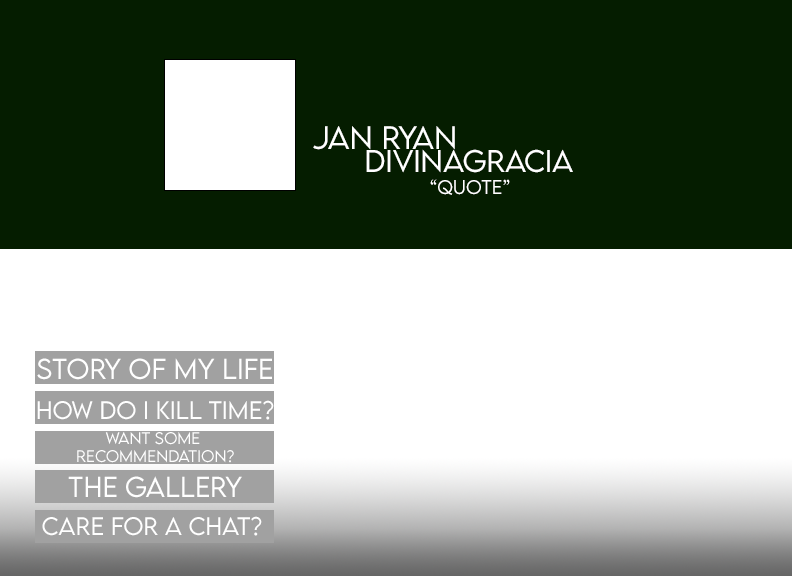
<style>
.page{position:relative;width:792px;height:576px;background:#051d00}
.page>*{position:absolute;margin:0}
.t1{font:28.9px "LEMONMILK-Light";color:#ffffff}
.t2{font:28px "LEMONMILK-Light";color:#ffffff}
.t3{font:17.7px "LEMONMILK-Light";color:#ffffff}
.t4{font:25.6px "LEMONMILK-Light";color:#ffffff}
.t5{font:22.6px "LEMONMILK-Light";color:#ffffff}
.t6{font:15px "LEMONMILK-Light";color:#ffffff}
</style>
<div class="page">
<p class="t1" style="left:313px;top:126px;width:142px;height:24px">Jan Ryan</p>
<p class="t2" style="left:366px;top:149px;width:207px;height:24px">divinagracia</p>
<p class="t3" style="left:430px;top:179px;width:80px;height:16px">“QUOTE”</p>
<p class="t4" style="left:37px;top:358px;width:235px;height:22px">Story of my life</p>
<p class="t5" style="left:37px;top:400px;width:237px;height:20px">How do I kill time?</p>
<p class="t6" style="left:77px;top:432px;width:157px;height:31px;text-align:center">want some<br> recommendation?</p>
<p class="t4" style="left:68px;top:476px;width:174px;height:22px">the Gallery</p>
<p class="t5" style="left:42px;top:516px;width:220px;height:20px">Care for a chat?</p>
</div>
